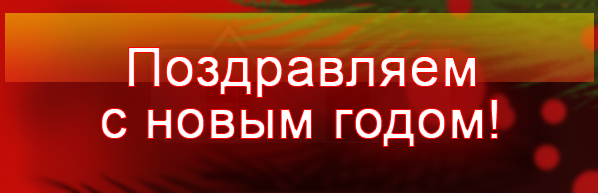
<style>
.page{position:relative;width:598px;height:193px}
.page>*{position:absolute;margin:0}
.t1{font:54.2px "ArialMT";color:#fefefe;font-weight:bold}
.t2{font:54.2px "Tahoma";color:#fefefe;font-weight:bold}
</style>
<div class="page">
<p class="t1" style="left:101px;top:47px;width:397px;height:100px;text-align:center"><span class="t2"> </span>Поздравляем <br>с новым годом!</p>
</div>
